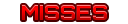
<style>
.page{position:relative;width:128px;height:24px;background:#ffffff}
.page>*{position:absolute;margin:0}
.t1{font:20px "Orbitron-Black"}
.t2{font:20px "Orbitron-Black";letter-spacing:-0.05em}
.t3{font:20px "Orbitron-Black";letter-spacing:0.05em}
.t4{font:21px "Orbitron-Black"}
</style>
<div class="page">
<p class="t1" style="left:22px;top:5px;width:85px;height:15px"><span class="t2">M</span><span class="t3">I</span>SS<span class="t4">E</span>S</p>
</div>
